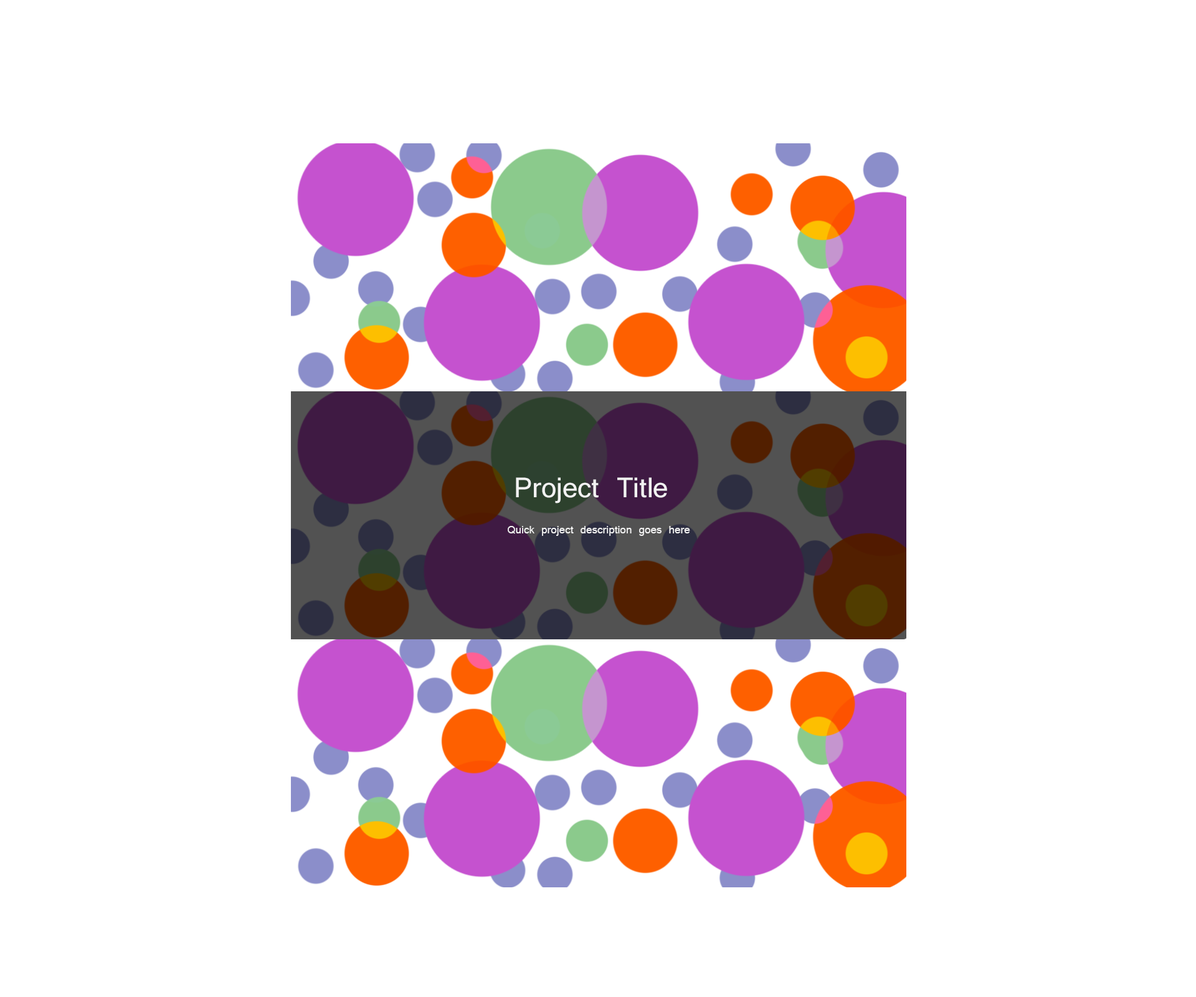
<style>
.page{position:relative;width:1196px;height:997px;background:#ffffff}
.page>*{position:absolute;margin:0}
.t1{font:30.4px "Latha";color:#f2f2f2}
.t2{font:11.8px "Latha";color:#f2f2f2}
</style>
<div class="page">
<p class="t1" style="left:516px;top:477px;width:151px;height:26px">Project Title</p>
<p class="t2" style="left:508px;top:526px;width:182px;height:10px">Quick project description goes here</p>
</div>
